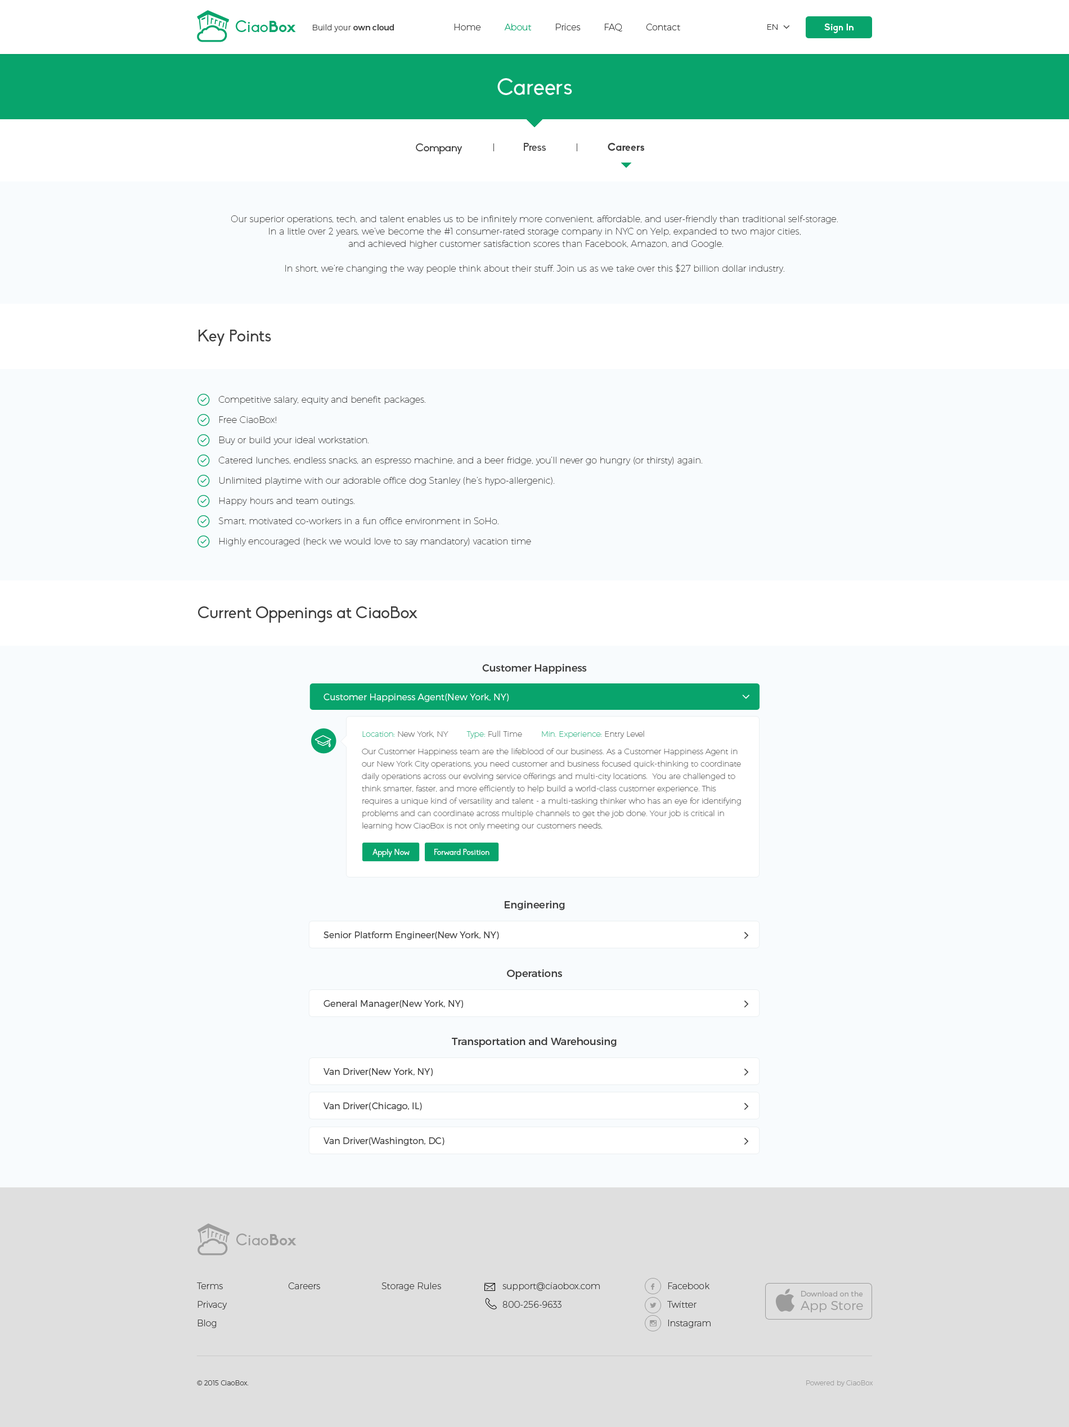
<style>
.page{position:relative;width:1069px;height:1427px;background:#f8fbfd}
.page>*{position:absolute;margin:0}
.t1{font:15.8px "Biko";color:#08a46c}
.t2{font:15.8px "Biko-Bold";color:#08a46c}
.t3{font:7.9px "Montserrat-UltraLight";color:#3d3d3d}
.t4{font:7.9px "Montserrat-Regular";color:#3d3d3d}
.t5{font:9px "Montserrat-UltraLight";color:#3d3d3d}
.t6{font:9px "Montserrat-UltraLight";color:#08a46c}
.t7{font:9.6px "Biko-Bold";color:#ffffff}
.t8{font:22.5px "Biko";color:#f8fbfd}
.t9{font:10.7px "Biko";color:#3d3d3d}
.t10{font:10.7px "Biko-Bold";color:#3d3d3d}
.t11{font:9px/12.4px "Montserrat-Hairline";color:#3d3d3d}
.t12{font:16.3px "Biko";color:#3d3d3d}
.t13{font:9px/20.2px "Montserrat-Hairline";color:#3d3d3d}
.t14{font:10.1px "Montserrat-Regular";color:#3d3d3d}
.t15{font:9px "Montserrat-Light";color:#ffffff}
.t16{font:7.9px "Montserrat-Hairline"}
.t17{font:7.9px/12.4px "Montserrat-Hairline"}
.t18{font:7.9px "Biko";color:#ffffff}
.t19{font:9px "Montserrat-Light";color:#3d3d3d}
.t20{font:15.8px "Biko";color:#9c9c9c}
.t21{font:15.8px "Biko-Bold";color:#9c9c9c}
.t22{font:9px/18.6px "Montserrat-UltraLight";color:#3d3d3d}
.t23{font:10.7px "Socialico";color:#9c9c9c;text-transform:uppercase}
.t24{font:7.3px/18.6px "Montserrat-Light";color:#9c9c9c}
.t25{font:12.8px/13.5px "Montserrat-Light";color:#9c9c9c}
.t26{font:6.8px "font2985";color:#9c9c9c}
.t27{font:6.8px "Montserrat-UltraLight";color:#3d3d3d}
.t28{font:6.8px "Montserrat-UltraLight";color:#9c9c9c}
</style>
<div class="page">
<p class="t1" style="left:236px;top:20px;width:60px;height:12px">Ciao<span class="t2">Box</span></p>
<p class="t3" style="left:313px;top:24px;width:81px;height:8px">Build your <span class="t4">own cloud</span></p>
<p class="t5" style="left:454px;top:24px;width:226px;height:8px">Home         <span class="t6">About         </span>Prices         FAQ         Contact</p>
<p class="t3" style="left:767px;top:24px;width:10px;height:6px">EN</p>
<p class="t7" style="left:824px;top:23px;width:29px;height:10px">Sign In</p>
<p class="t8" style="left:497px;top:78px;width:75px;height:17px">Careers</p>
<p class="t9" style="left:416px;top:143px;width:46px;height:11px">Company</p>
<p class="t9" style="left:524px;top:143px;width:22px;height:8px">Press</p>
<p class="t10" style="left:608px;top:143px;width:36px;height:8px">Careers</p>
<p class="t11" style="left:231px;top:215px;width:607px;height:58px;text-align:center">Our superior operations, tech, and talent enables us to be infinitely more convenient, affordable, and user-friendly than traditional self-storage. In a little over 2 years, we’ve become the #1 consumer-rated storage company in NYC on Yelp, expanded to two major cities,<br> and achieved higher customer satisfaction scores than Facebook, Amazon, and Google.<br><br>In short, we’re changing the way people think about their stuff. Join us as we take over this $27 billion dollar industry.</p>
<p class="t12" style="left:199px;top:330px;width:72px;height:16px">Key Points</p>
<p class="t13" style="left:218px;top:396px;width:484px;height:150px">Competitive salary, equity and benefit packages.<br>Free CiaoBox!<br>Buy or build your ideal workstation.<br>Catered lunches, endless snacks, an espresso machine, and a beer fridge, you’ll never go hungry (or thirsty) again.<br>Unlimited playtime with our adorable office dog Stanley (he’s hypo-allergenic).<br>Happy hours and team outings.<br>Smart, motivated co-workers in a fun office environment in SoHo.<br>Highly encouraged (heck we would love to say mandatory) vacation time</p>
<p class="t12" style="left:198px;top:606px;width:219px;height:17px">Current Oppenings at CiaoBox</p>
<p class="t14" style="left:482px;top:664px;width:105px;height:10px">Customer Happiness</p>
<p class="t15" style="left:323px;top:694px;width:185px;height:8px">Customer Happiness Agent(New York, NY)</p>
<p class="t16" style="left:362px;top:731px;width:282px;height:8px">Location: New York, NY        Type: Full Time        Min. Experience: Entry Level</p>
<p class="t17" style="left:362px;top:748px;width:379px;height:82px">Our Customer Happiness team are the lifeblood of our business. As a Customer Happiness Agent in our New York City operations, you need customer and business focused quick-thinking to coordinate daily operations across our evolving service offerings and multi-city locations.  You are challenged to think smarter, faster, and more efficiently to help build a world-class customer experience. This requires a unique kind of versatility and talent - a multi-tasking thinker who has an eye for identifying problems and can coordinate across multiple channels to get the job done. Your job is critical in learning how CiaoBox is not only meeting our customers needs,</p>
<p class="t18" style="left:372px;top:849px;width:38px;height:8px">Apply Now</p>
<p class="t18" style="left:434px;top:849px;width:55px;height:6px">Forward Position</p>
<p class="t14" style="left:505px;top:901px;width:60px;height:9px">Engineering</p>
<p class="t19" style="left:323px;top:932px;width:176px;height:8px">Senior Platform Engineer(New York, NY)</p>
<p class="t14" style="left:507px;top:969px;width:55px;height:10px">Operations</p>
<p class="t19" style="left:323px;top:1000px;width:140px;height:9px">General Manager(New York, NY)</p>
<p class="t14" style="left:452px;top:1037px;width:164px;height:10px">Transportation and Warehousing</p>
<p class="t19" style="left:323px;top:1068px;width:110px;height:9px">Van Driver(New York, NY)</p>
<p class="t19" style="left:323px;top:1102px;width:99px;height:9px">Van Driver(Chicago, IL)</p>
<p class="t19" style="left:323px;top:1137px;width:121px;height:9px">Van Driver(Washington, DC)</p>
<p class="t20" style="left:236px;top:1234px;width:60px;height:11px">Ciao<span class="t21">Box</span></p>
<p class="t22" style="left:197px;top:1282px;width:30px;height:46px">Terms<br>Privacy<br>Blog</p>
<p class="t5" style="left:288px;top:1282px;width:32px;height:7px">Careers</p>
<p class="t5" style="left:381px;top:1282px;width:60px;height:9px">Storage Rules</p>
<p class="t22" style="left:502px;top:1282px;width:98px;height:26px">support@ciaobox.com<br>800-256-9633</p>
<p class="t23" style="left:650px;top:1283px;width:4px;height:7px">F</p>
<p class="t22" style="left:667px;top:1282px;width:43px;height:46px">Facebook<br>Twitter<br>Instagram</p>
<p class="t24" style="left:800px;top:1291px;width:63px;height:21px">Download on the<br><span class="t25">App Store</span></p>
<p class="t23" style="left:650px;top:1303px;width:6px;height:5px">L</p>
<p class="t26" style="left:650px;top:1320px;width:6px;height:6px">x</p>
<p class="t27" style="left:197px;top:1380px;width:52px;height:5px">© 2015 CiaoBox.</p>
<p class="t28" style="left:806px;top:1380px;width:66px;height:7px">Powered by CiaoBox</p>
</div>
